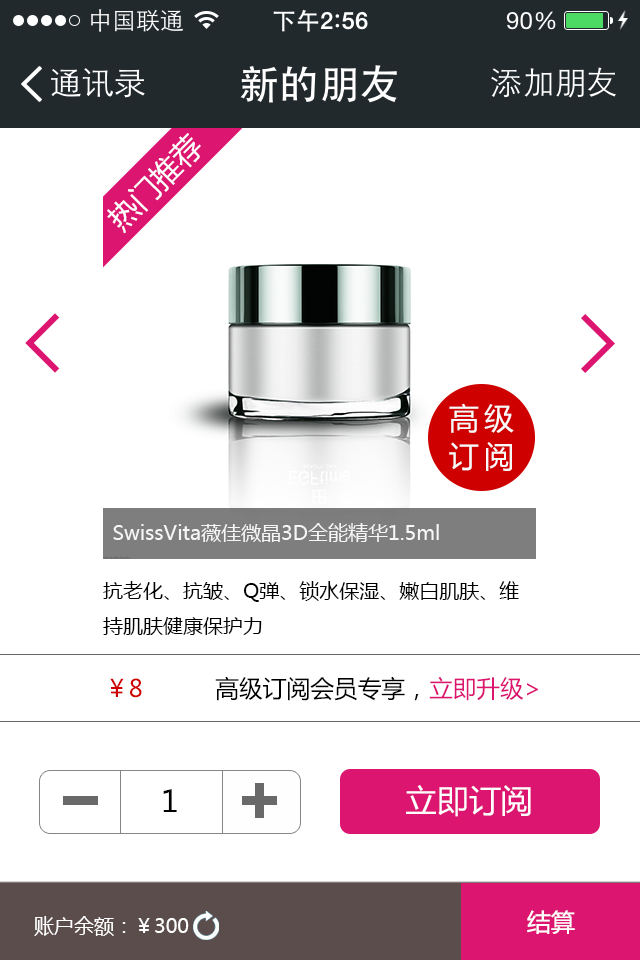
<style>
.page{position:relative;width:640px;height:960px;background:#ffffff}
.page>*{position:absolute;margin:0}
.t1{font:30px/38.2px "MicrosoftYaHei";letter-spacing:0.18em;color:#f9f9f9}
.t2{font:20px "MicrosoftYaHei";color:#f7f6f6}
.t3{font:20px "MicrosoftYaHei";color:#000000}
.t4{font:24px "MicrosoftYaHei";color:#000000}
.t5{font:24px "MicrosoftYaHei";color:#ce0000}
.t6{font:24px "MicrosoftYaHei";color:#dc1570}
.t7{font:32.4px "MicrosoftYaHei";color:#ffffff}
.t8{font:30px "MicrosoftYaHei";color:#000000}
.t9{font:20px "MicrosoftYaHei";color:#ffffff}
.t10{font:20px "MicrosoftYaHei";color:#fffefe}
.t11{font:24px "MicrosoftYaHei";color:#ffffff}
</style>
<div class="page">
<p class="t1" style="left:449px;top:403px;width:65px;height:68px">高级<br>订阅</p>
<p class="t2" style="left:113px;top:523px;width:326px;height:19px">SwissVita薇佳微晶3D全能精华1.5ml</p>
<p class="t3" style="left:103px;top:581px;width:416px;height:54px">抗老化、抗皱、Q弹、锁水保湿、嫩白肌肤、维<br>持肌肤健康保护力</p>
<p class="t4" style="left:110px;top:676px;width:428px;height:25px"><span class="t5">￥8        </span>高级订阅会员专享，<span class="t6">立即升级&gt;</span></p>
<p class="t7" style="left:406px;top:785px;width:125px;height:32px">立即订阅</p>
<p class="t8" style="left:163px;top:789px;width:14px;height:23px">1</p>
<p class="t9" style="left:34px;top:916px;width:155px;height:20px">账户余额：<span class="t10">￥</span>300</p>
<p class="t11" style="left:527px;top:910px;width:48px;height:24px">结算</p>
</div>
